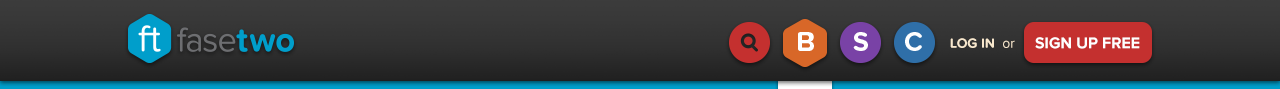
<style>
.page{position:relative;width:1280px;height:89px}
.page>*{position:absolute;margin:0}
.t1{font:14px "ProximaNovaSoft-Bold";color:#f7e7cd;text-transform:uppercase}
.t2{font:14px "ProximaNova-Regular";color:#f7e7cd}
.t3{font:16px "ProximaNova-Bold";color:#ffffff;text-transform:uppercase}
</style>
<div class="page">
<p class="t1" style="left:950px;top:38px;width:65px;height:10px">Log in  <span class="t2">or</span></p>
<p class="t3" style="left:1035px;top:37px;width:105px;height:12px">sign up free</p>
</div>
